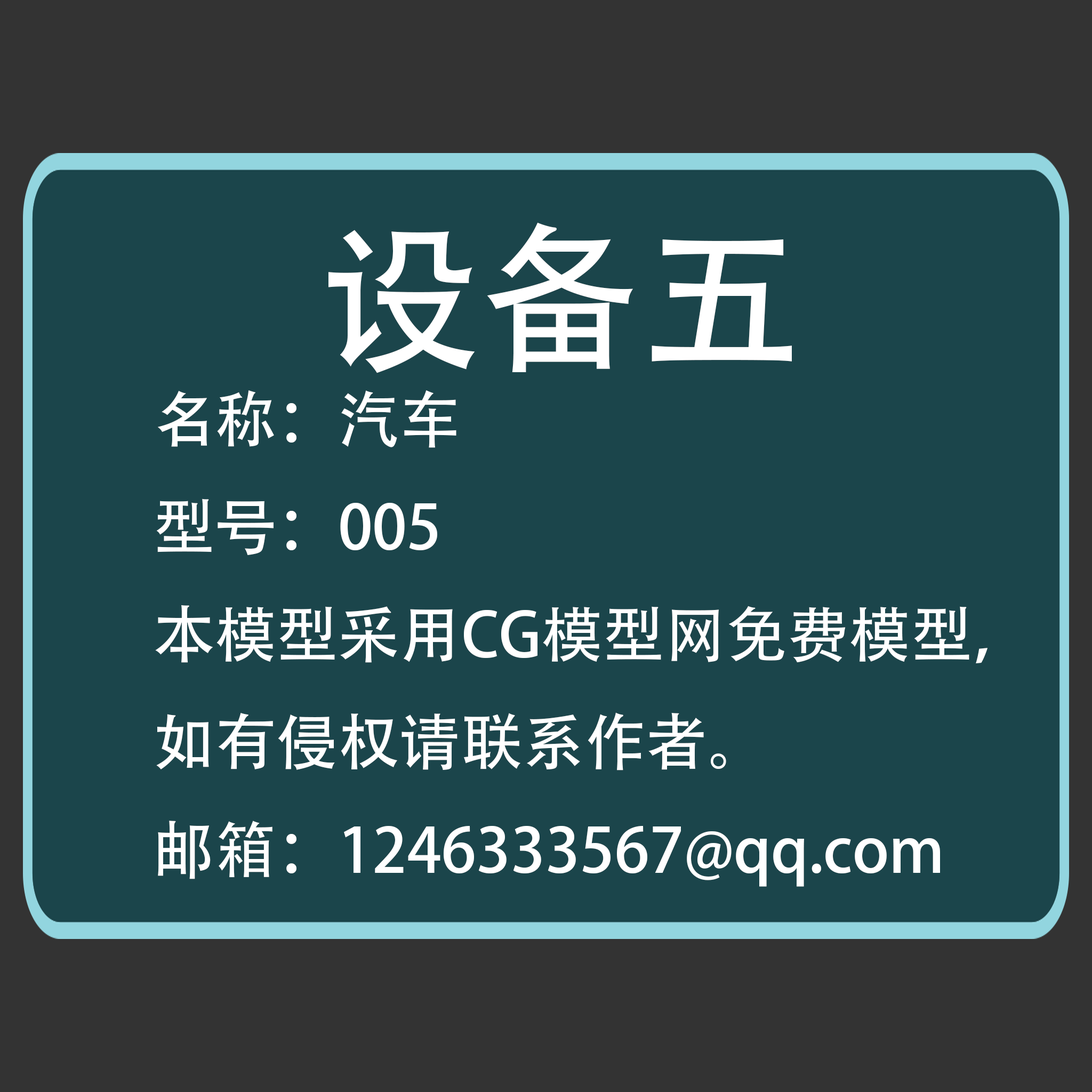
<style>
.page{position:relative;width:1092px;height:1092px;background:#1b454b}
.page>*{position:absolute;margin:0}
.t1{font:159.8px "AdobeHeitiStd-Regular";color:#ffffff}
.t2{font:61.6px "AdobeHeitiStd-Regular";color:#ffffff}
</style>
<div class="page">
<p class="t1" style="left:328px;top:222px;width:464px;height:151px">设备五</p>
<p class="t2" style="left:155px;top:390px;width:832px;height:497px">名称：汽车<br>型号：005<br>本模型采用CG模型网免费模型，<br>如有侵权请联系作者。<br>邮箱：1246333567@qq.com</p>
</div>
